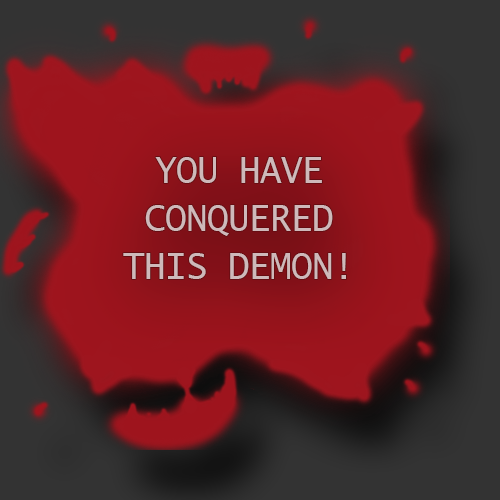
<style>
.page{position:relative;width:500px;height:500px}
.page>*{position:absolute;margin:0}
.t1{font:36px/48px "LucidaSans-Typewriter";letter-spacing:-0.02em;color:#ceb9ba}
</style>
<div class="page">
<p class="t1" style="left:123px;top:157px;width:223px;height:122px;text-align:center">YOU HAVE CONQUERED THIS DEMON!</p>
</div>
